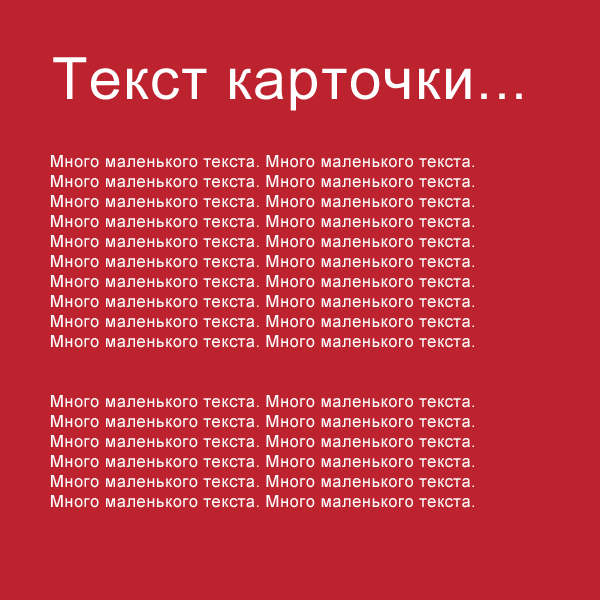
<style>
.page{position:relative;width:600px;height:600px;background:#bd232e}
.page>*{position:absolute;margin:0}
.t1{font:58.3px "ArialMT";letter-spacing:0.025em;color:#ffffff}
.t2{font:16.7px "ArialMT";letter-spacing:0.025em;color:#ffffff}
</style>
<div class="page">
<p class="t1" style="left:53px;top:57px;width:469px;height:54px">Текст карточки...</p>
<p class="t2" style="left:51px;top:155px;width:423px;height:353px">Много маленького текста. Много маленького текста. <br>Много маленького текста. Много маленького текста.<br>Много маленького текста. Много маленького текста. <br>Много маленького текста. Много маленького текста.<br>Много маленького текста. Много маленького текста. <br>Много маленького текста. Много маленького текста.<br>Много маленького текста. Много маленького текста. <br>Много маленького текста. Много маленького текста.<br>Много маленького текста. Много маленького текста. <br>Много маленького текста. Много маленького текста.<br><br><br>Много маленького текста. Много маленького текста. <br>Много маленького текста. Много маленького текста.<br>Много маленького текста. Много маленького текста. <br>Много маленького текста. Много маленького текста.<br>Много маленького текста. Много маленького текста. <br>Много маленького текста. Много маленького текста.</p>
</div>
